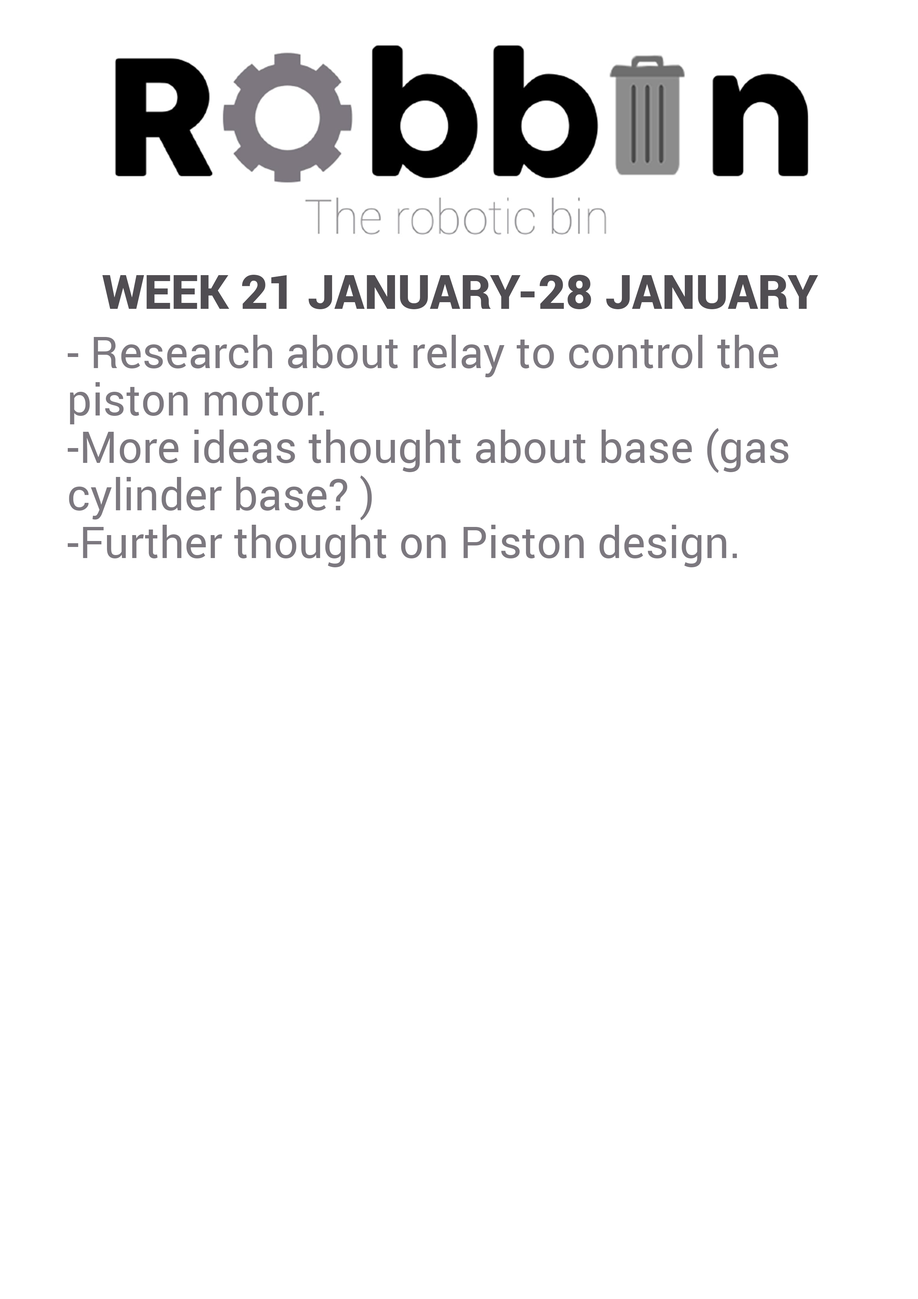
<style>
.page{position:relative;width:918px;height:1299px;background:#ffffff}
.page>*{position:absolute;margin:0}
.t1{font:47.4px "Roboto-Black";color:#504d52;text-transform:uppercase}
.t2{font:43.8px/47.4px "Roboto-Regular";color:#7c787f}
</style>
<div class="page">
<p class="t1" style="left:102px;top:275px;width:717px;height:34px">Week 21 January-28 January</p>
<p class="t2" style="left:68px;top:335px;width:721px;height:232px">- Research about relay to control the <br>piston motor. <br>-More ideas thought about base (gas <br>cylinder base? ) <br>-Further thought on Piston design.</p>
</div>
